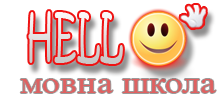
<style>
.page{position:relative;width:220px;height:100px;background:#ffffff}
.page>*{position:absolute;margin:0}
.t1{font:57.6px "KristenITC-Regular";letter-spacing:0.025em;scale:0.54 1}
.t2{font:48px "KristenITC-Regular";letter-spacing:0.025em;scale:0.65 1}
.t3{font:31.2px "TimesNewRomanPSMT";color:#df6161;scale:1.15 1}
</style>
<div class="page">
<p class="t1" style="left:28px;top:11px;width:95px;height:53px"><span class="t2"> </span>HELL</p>
<p class="t3" style="left:20px;top:79px;width:196px;height:14px">мовна школа</p>
</div>
